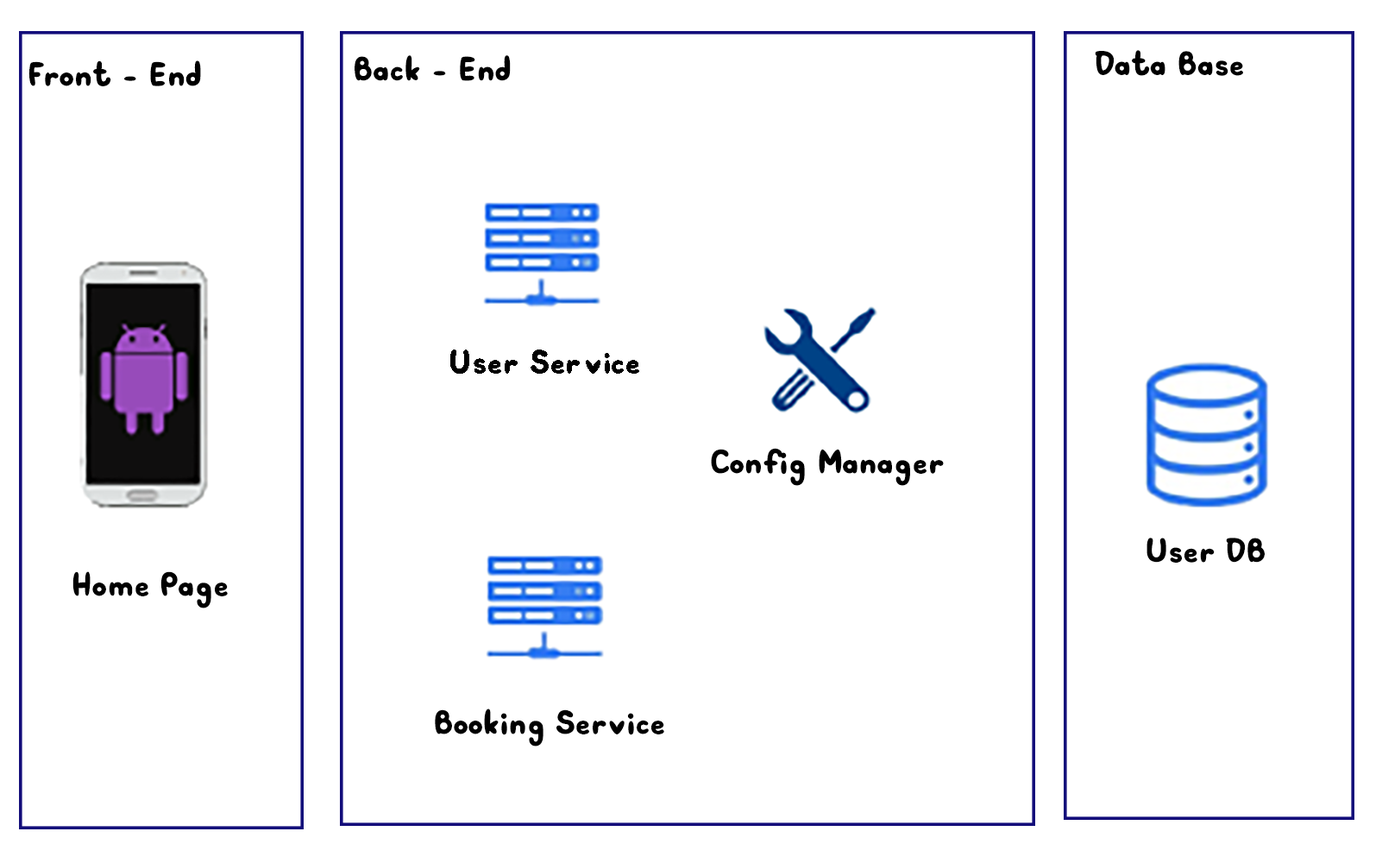
<style>
.page{position:relative;width:1382px;height:863px;background:#ffffff}
.page>*{position:absolute;margin:0}
.t1{font:46.4px "SVN-Bublont";color:#000000}
</style>
<div class="page">
<p class="t1" style="left:1095px;top:50px;width:148px;height:26px">Data Base</p>
<p class="t1" style="left:28px;top:60px;width:173px;height:26px">Front - End</p>
<p class="t1" style="left:355px;top:55px;width:156px;height:26px">Back - End</p>
<p class="t1" style="left:450px;top:349px;width:189px;height:25px">User Service</p>
<p class="t1" style="left:711px;top:448px;width:233px;height:38px">Config Manager</p>
<p class="t1" style="left:1147px;top:537px;width:118px;height:26px">User DB</p>
<p class="t1" style="left:72px;top:571px;width:156px;height:37px">Home Page</p>
<p class="t1" style="left:435px;top:708px;width:229px;height:38px">Booking Service</p>
</div>
